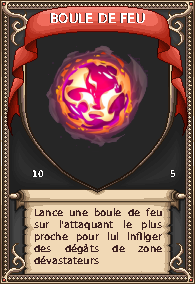
<style>
.page{position:relative;width:195px;height:284px}
.page>*{position:absolute;margin:0}
.t1{font:13px "DigitalDisco-Thin";text-transform:uppercase}
.t2{font:13px "DigitalDisco-Thin";color:#ffffff;text-transform:uppercase}
.t3{font:9px "DigitalDisco-Thin";color:#ffffff;text-transform:uppercase}
.t4{font:10px "DigitalDisco-Thin";color:#3f2222}
</style>
<div class="page">
<p class="t1" style="left:50px;top:13px;width:94px;height:11px">boule de feu</p>
<p class="t2" style="left:51px;top:13px;width:94px;height:11px">boule de feu</p>
<p class="t3" style="left:32px;top:170px;width:12px;height:8px">10</p>
<p class="t3" style="left:170px;top:170px;width:5px;height:8px">5</p>
<p class="t4" style="left:34px;top:208px;width:129px;height:57px;text-align:justify">Lance une boule de feu sur l'attaquant le plus proche pour lui infliger des dégâts de zone dévastateurs</p>
</div>
